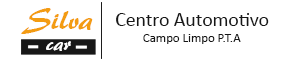
<style>
.page{position:relative;width:300px;height:60px;background:#ffffff}
.page>*{position:absolute;margin:0}
.t1{font:29.7px "ARBERKLEY";color:#f39c12}
.t2{font:19.8px "Calibri";color:#171717}
.t3{font:20.6px "ARBERKLEY";color:#fefefe}
.t4{font:12.8px "Calibri";color:#171717}
</style>
<div class="page">
<p class="t1" style="left:21px;top:8px;width:72px;height:26px">Silva</p>
<p class="t2" style="left:116px;top:13px;width:153px;height:13px">Centro Automotivo</p>
<p class="t3" style="left:46px;top:41px;width:25px;height:10px">car</p>
<p class="t4" style="left:143px;top:34px;width:98px;height:10px">Campo Limpo P.T.A</p>
</div>
